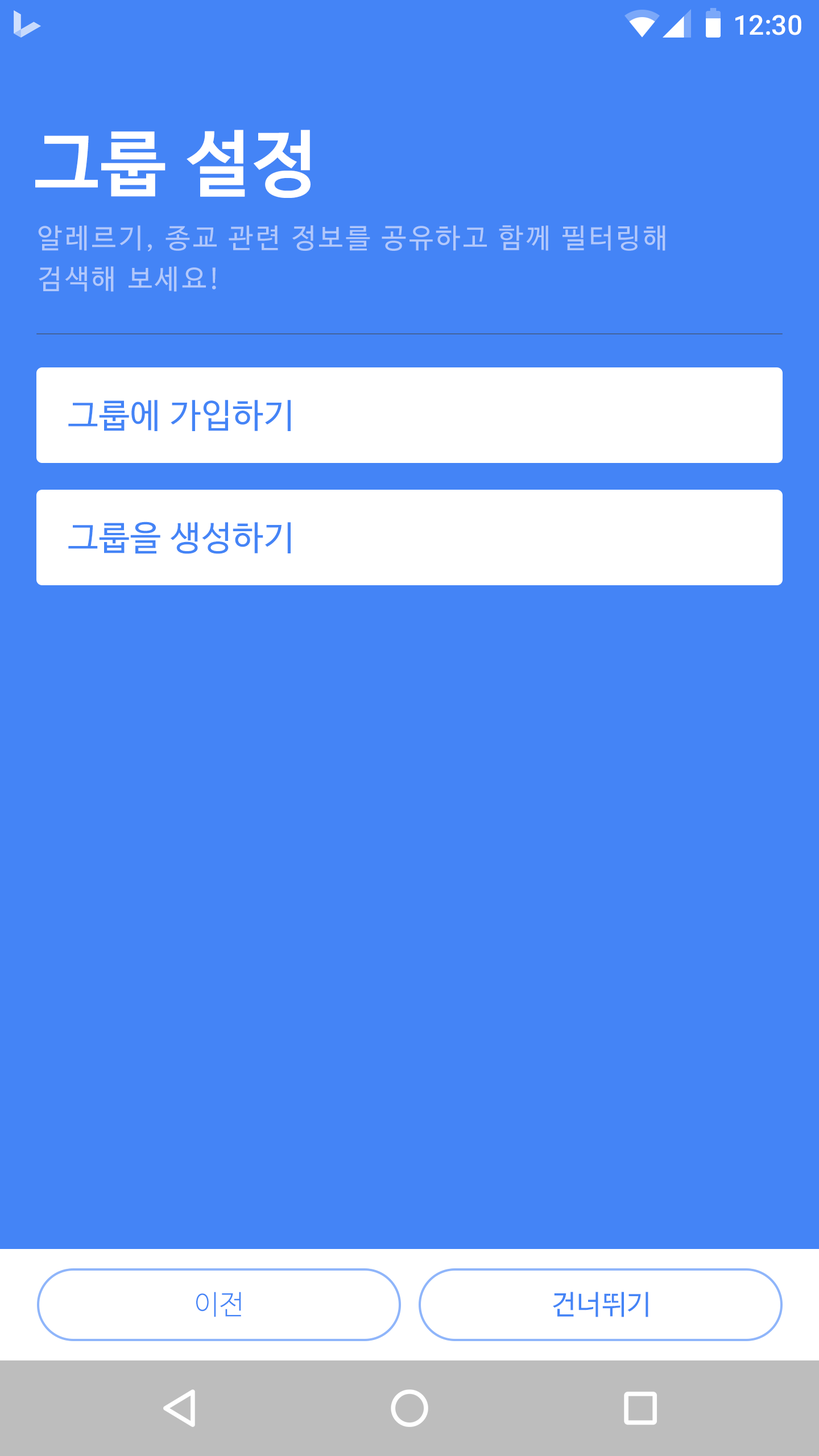
<style>
.page{position:relative;width:819px;height:1456px;background:#4484f6}
.page>*{position:absolute;margin:0}
.t1{font:27.3px "Roboto-Medium";color:#ffffff}
.t2{font:72.8px "NanumBarunGothicBold";letter-spacing:0.025em;color:#ffffff}
.t3{font:27.3px/40.9px "NanumBarunGothic";letter-spacing:0.1em;color:#b2c8fb}
.t4{font:34.1px "NanumBarunGothic";letter-spacing:0.025em;color:#4484f6}
.t5{font:27.3px "NanumBarunGothicLight";letter-spacing:0.025em;color:#4484f6}
.t6{font:27.3px "NanumBarunGothic";letter-spacing:0.025em;color:#4484f6}
</style>
<div class="page">
<p class="t1" style="left:735px;top:15px;width:66px;height:20px">12:30</p>
<p class="t2" style="left:35px;top:130px;width:276px;height:68px">그룹 설정</p>
<p class="t3" style="left:38px;top:225px;width:627px;height:67px">알레르기, 종교 관련 정보를 공유하고 함께 필터링해<br>검색해 보세요!</p>
<p class="t4" style="left:68px;top:400px;width:223px;height:31px">그룹에 가입하기</p>
<p class="t4" style="left:68px;top:522px;width:223px;height:32px">그룹을 생성하기</p>
<p class="t5" style="left:196px;top:1292px;width:45px;height:25px">이전</p>
<p class="t6" style="left:553px;top:1292px;width:95px;height:25px">건너뛰기</p>
</div>
